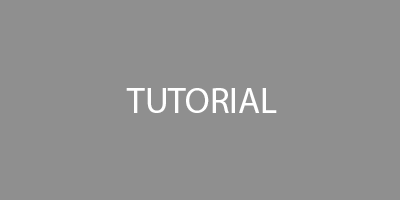
<style>
.page{position:relative;width:400px;height:200px;background:#8f8f8f}
.page>*{position:absolute;margin:0}
.t1{font:36px "MyriadPro-Regular";color:#ffffff}
</style>
<div class="page">
<p class="t1" style="left:126px;top:88px;width:151px;height:25px">TUTORIAL</p>
</div>
